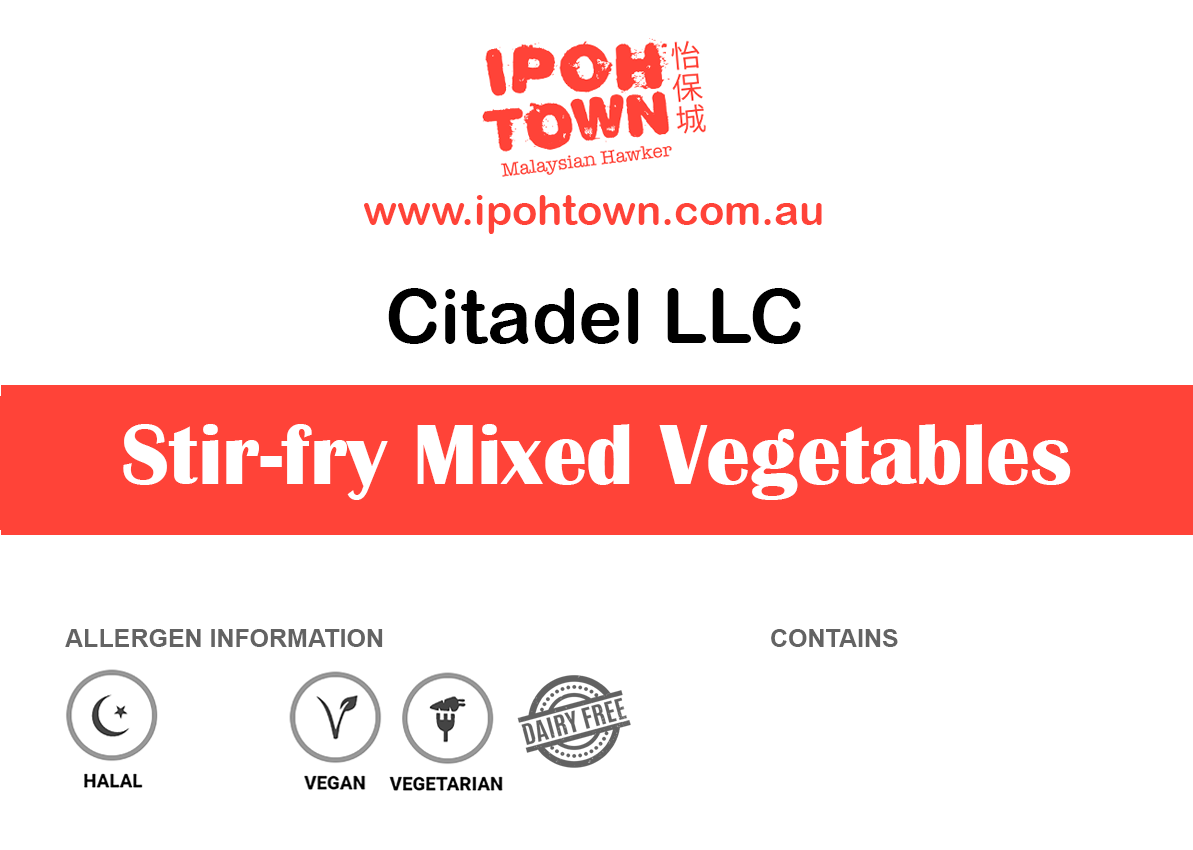
<style>
.page{position:relative;width:1193px;height:850px;background:#ffffff}
.page>*{position:absolute;margin:0}
.t1{font:41.7px "ArialRoundedMTBold";color:#ff4338}
.t2{font:75px "ArialRoundedMTBold";color:#000000}
.t3{font:87.5px "BritannicBold";color:#ffffff}
.t4{font:25px "Arial-BoldMT";color:#636363}
</style>
<div class="page">
<p class="t1" style="left:364px;top:195px;width:458px;height:39px">www.ipohtown.com.au</p>
<p class="t2" style="left:388px;top:288px;width:413px;height:56px">Citadel LLC</p>
<p class="t3" style="left:123px;top:424px;width:948px;height:76px">Stir-fry Mixed Vegetables</p>
<p class="t4" style="left:65px;top:629px;width:318px;height:18px">ALLERGEN INFORMATION</p>
<p class="t4" style="left:771px;top:629px;width:127px;height:18px">CONTAINS</p>
</div>
